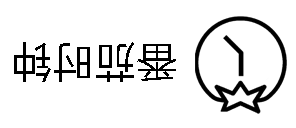
<style>
.page{position:relative;width:296px;height:128px;background:#ffffff}
.page>*{position:absolute;margin:0}
.t1{font:42px "OPPOSans-R";color:#000000}
</style>
<div class="page">
<p class="t1" style="left:14px;top:42px;width:162px;height:40px;rotate:180deg">番茄时钟</p>
</div>
